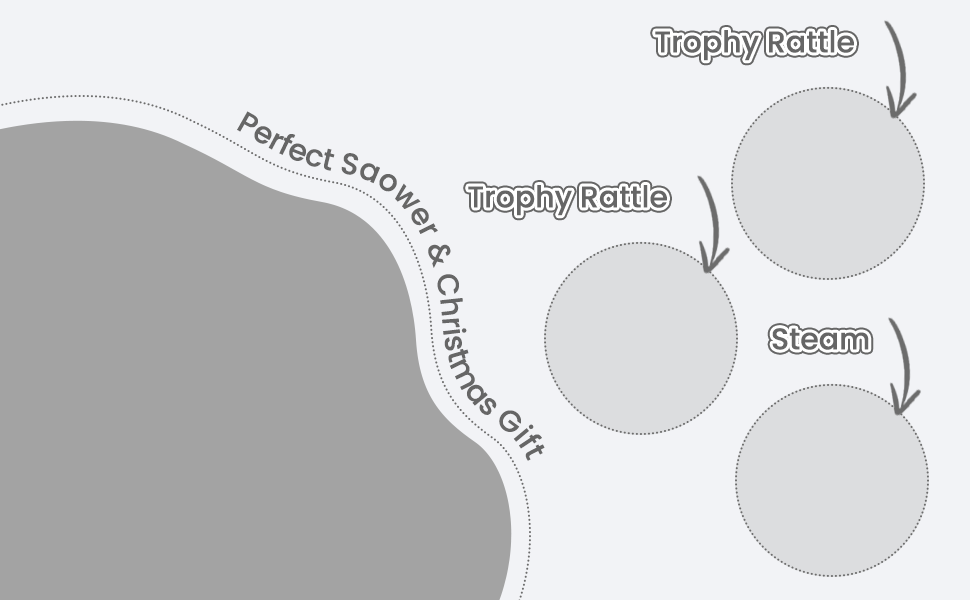
<style>
.page{position:relative;width:970px;height:600px;background:#f2f3f6}
.page>*{position:absolute;margin:0}
.t1{font:30px "Poppins-Medium";color:#666666}
</style>
<div class="page">
<p class="t1" style="left:655px;top:30px;width:199px;height:31px">Trophy Rattle</p>
<p class="t1" style="left:237px;top:111px;width:308px;height:350px;text-align:center">Perfect Saower &amp; Christmas Gift</p>
<p class="t1" style="left:468px;top:185px;width:199px;height:31px">Trophy Rattle</p>
<p class="t1" style="left:772px;top:328px;width:97px;height:22px">Steam</p>
</div>
